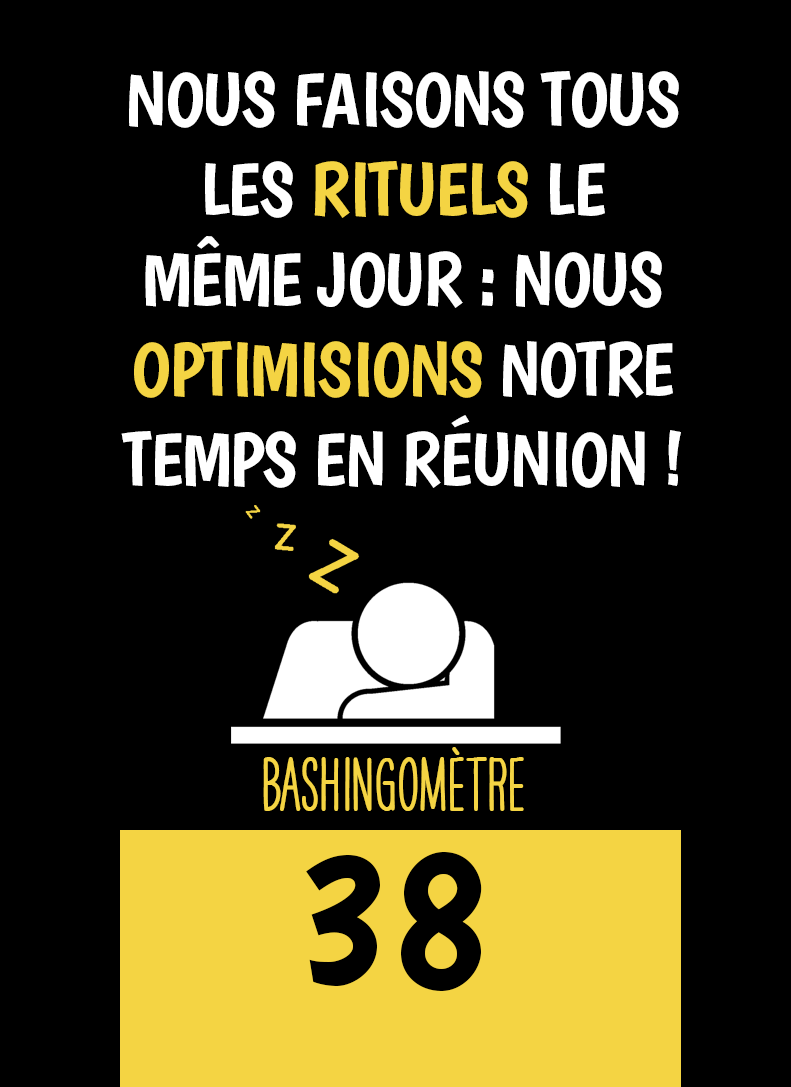
<style>
.page{position:relative;width:791px;height:1087px;background:#000000}
.page>*{position:absolute;margin:0}
.t1{font:75px "Boogaloo-Regular";letter-spacing:-0.02em;color:#ffffff}
.t2{font:75px "Boogaloo-Regular";letter-spacing:-0.02em;color:#f4d443}
.t3{font:66.7px "HAVEANICEDAYTallW04-Bold";color:#f4d443}
.t4{font:200px "Boogaloo-Regular";color:#000000}
</style>
<div class="page">
<p class="t1" style="left:121px;top:71px;width:560px;height:417px;text-align:center">NOUS FAISONS TOUS LES <span class="t2">RITUELS </span>LE MÊME JOUR : NOUS <span class="t2">OPTIMISIONS</span> NOTRE TEMPS EN RÉUNION !</p>
<p class="t3" style="left:263px;top:747px;width:261px;height:64px">BASHINgomètre</p>
<p class="t4" style="left:306px;top:852px;width:176px;height:139px">38</p>
</div>
